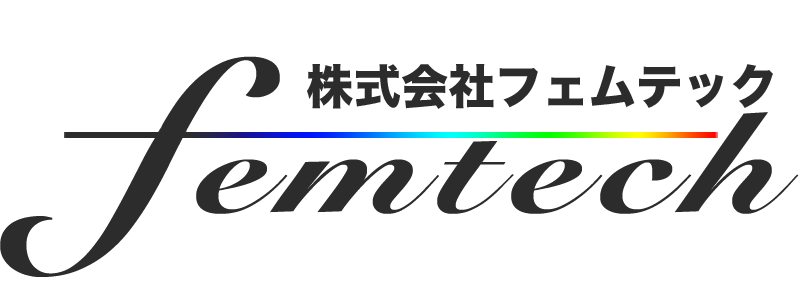
<style>
.page{position:relative;width:800px;height:300px;background:#ffffff}
.page>*{position:absolute;margin:0}
.t1{font:216px "SnellRoundhand-Black";color:#262626}
.t2{font:47.1px "HiraKakuStdN-W8";color:#262626}
.t3{font:141.4px "SnellRoundhand-Black";letter-spacing:0.1em;color:#262626;scale:1.2 1}
</style>
<div class="page">
<p class="t1" style="left:0px;top:56px;width:280px;height:221px">f</p>
<p class="t2" style="left:307px;top:64px;width:466px;height:45px">株式会社フェムテック</p>
<p class="t3" style="left:196px;top:112px;width:603px;height:102px">emtech</p>
</div>
